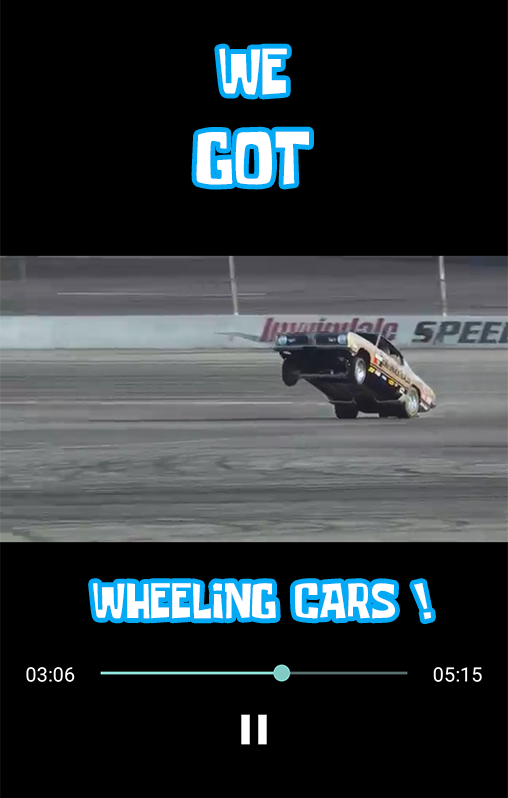
<style>
.page{position:relative;width:508px;height:798px;background:#000000}
.page>*{position:absolute;margin:0}
.t1{font:75px "SomeTimeLater";color:#ffffff}
.t2{font:65px "SomeTimeLater";color:#ffffff}
.t3{font:50px "SomeTimeLater";color:#ffffff}
</style>
<div class="page">
<p class="t1" style="left:196px;top:48px;width:113px;height:137px;text-align:center"><span class="t2">WE<br></span>GOT</p>
<p class="t3" style="left:93px;top:583px;width:338px;height:37px">WHEELING CARS !</p>
</div>
